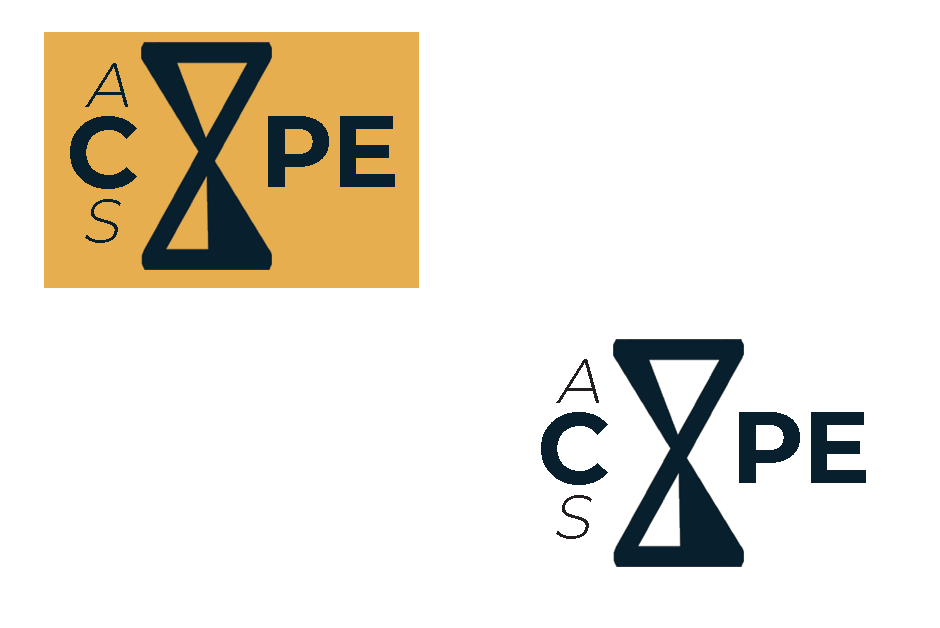
<style>
.page{position:relative;width:940px;height:628px;background:#ffffff}
.page>*{position:absolute;margin:0}
.t1{font:62px "Montserrat-Light";color:#081f2e;font-style:italic}
.t2{font:100px "Montserrat-Bold";color:#081f2e}
.t3{font:62px "Montserrat-Light";color:#231f20;font-style:italic}
</style>
<div class="page">
<p class="t1" style="left:85px;top:63px;width:43px;height:44px">A</p>
<p class="t2" style="left:70px;top:116px;width:67px;height:73px">C</p>
<p class="t2" style="left:268px;top:116px;width:127px;height:71px">PE</p>
<p class="t1" style="left:85px;top:199px;width:36px;height:44px">S</p>
<p class="t3" style="left:556px;top:359px;width:43px;height:44px">A</p>
<p class="t2" style="left:541px;top:412px;width:67px;height:73px">C</p>
<p class="t2" style="left:739px;top:412px;width:127px;height:71px">PE</p>
<p class="t3" style="left:556px;top:495px;width:36px;height:44px">S</p>
</div>
